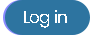
<style>
.page{position:relative;width:92px;height:35px;background:#2d74a0}
.page>*{position:absolute;margin:0}
.t1{font:16.7px "Poppins-Regular";letter-spacing:-0.05em;color:#ffffff}
</style>
<div class="page">
<p class="t1" style="left:24px;top:10px;width:43px;height:18px">Log in</p>
</div>
